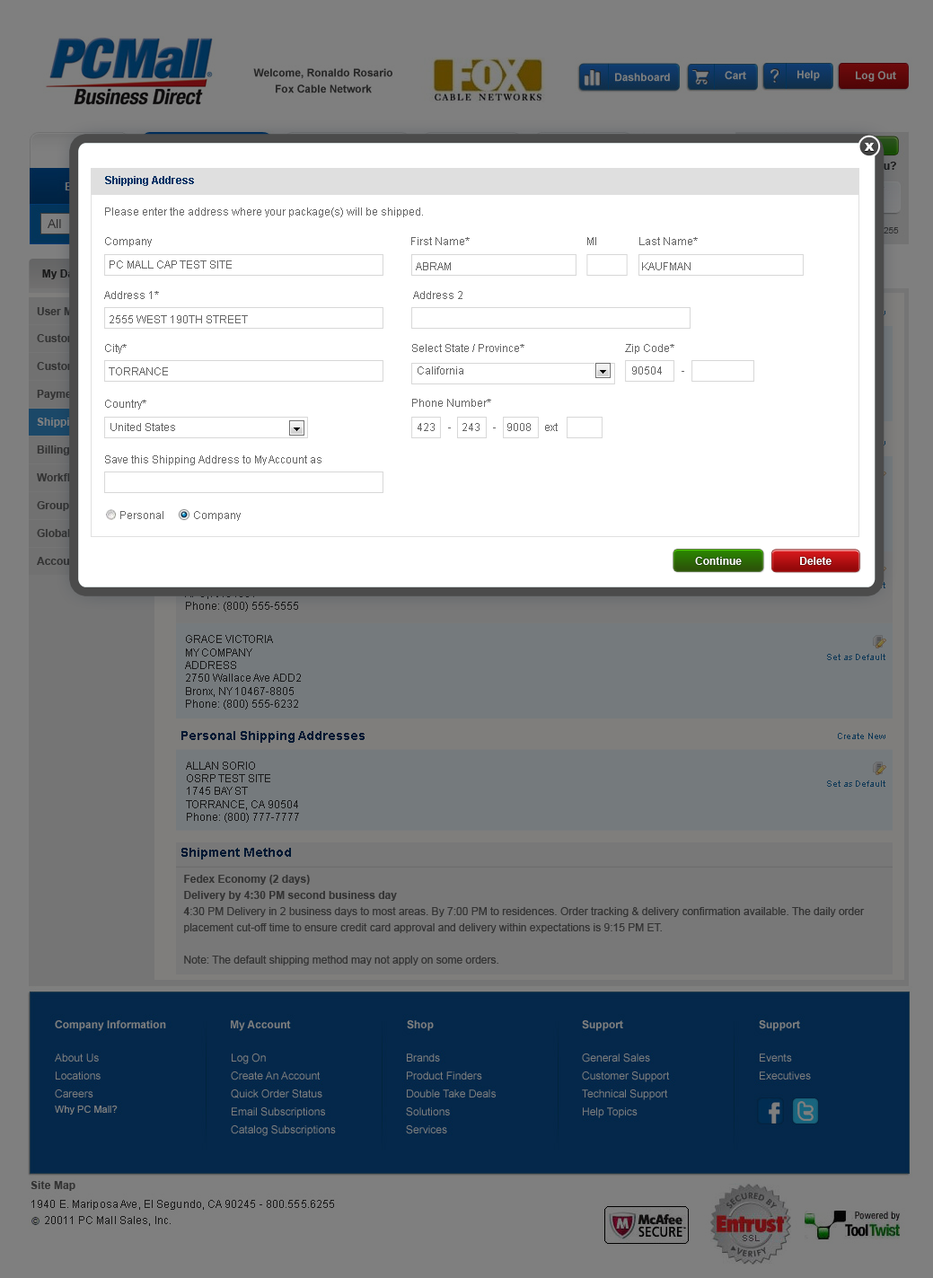
<style>
.page{position:relative;width:933px;height:1278px;background:#ffffff}
.page>*{position:absolute;margin:0}
.t1{font:10.8px "Arial-BoldMT";color:#003366}
.t2{font:10.8px "ArialMT";color:#666666}
.t3{font:10.8px "Arial-BoldMT"}
.t4{font:10.8px "Arial-BoldMT";color:#333333}
.t5{font:10.8px "Arial-BoldMT";color:#ffffff}
.t6{font:10.8px "ArialMT";color:#191919}
.t7{font:9px "ArialMT";color:#113a58}
.t8{font:12.6px "Arial-BoldMT";color:#001933}
.t9{font:10.8px/16.2px "ArialMT";color:#333333}
.t10{font:10.8px/16.2px "Arial-BoldMT";color:#333333}
</style>
<div class="page">
<p class="t1" style="left:105px;top:176px;width:89px;height:10px">Shipping Address</p>
<p class="t2" style="left:105px;top:207px;width:318px;height:10px">Please enter the address where your package(s) will be shipped.</p>
<p class="t2" style="left:105px;top:237px;width:47px;height:10px">Company</p>
<p class="t2" style="left:411px;top:237px;width:59px;height:8px">First Name*</p>
<p class="t2" style="left:587px;top:237px;width:9px;height:8px">MI</p>
<p class="t2" style="left:639px;top:237px;width:59px;height:8px">Last Name*</p>
<p class="t2" style="left:110px;top:260px;width:122px;height:9px">PC MALL CAP TEST SITE</p>
<p class="t2" style="left:416px;top:262px;width:35px;height:8px">ABRAM</p>
<p class="t2" style="left:642px;top:262px;width:49px;height:8px">KAUFMAN</p>
<p class="t2" style="left:104px;top:291px;width:55px;height:8px">Address 1*</p>
<p class="t2" style="left:413px;top:291px;width:50px;height:8px">Address 2</p>
<p class="t2" style="left:110px;top:315px;width:138px;height:8px">2555 WEST 190TH STREET</p>
<p class="t2" style="left:105px;top:344px;width:22px;height:10px">City*</p>
<p class="t2" style="left:412px;top:344px;width:112px;height:8px">Select State / Province*</p>
<p class="t2" style="left:625px;top:344px;width:49px;height:10px">Zip Code*</p>
<p class="t2" style="left:109px;top:367px;width:59px;height:8px">TORRANCE</p>
<p class="t2" style="left:418px;top:366px;width:45px;height:8px">California</p>
<p class="t2" style="left:632px;top:366px;width:30px;height:8px">90504</p>
<p class="t2" style="left:105px;top:400px;width:41px;height:10px">Country*</p>
<p class="t2" style="left:412px;top:399px;width:79px;height:8px">Phone Number*</p>
<p class="t3" style="left:37px;top:418px;width:46px;height:9px">Shipping</p>
<p class="t2" style="left:110px;top:423px;width:65px;height:8px">United States</p>
<p class="t2" style="left:418px;top:423px;width:17px;height:8px">423</p>
<p class="t2" style="left:463px;top:423px;width:17px;height:8px">243</p>
<p class="t2" style="left:507px;top:423px;width:24px;height:8px">9008</p>
<p class="t2" style="left:545px;top:423px;width:13px;height:8px">ext</p>
<p class="t4" style="left:37px;top:445px;width:32px;height:10px">Billing</p>
<p class="t2" style="left:105px;top:455px;width:217px;height:10px">Save this Shipping Address to My Account as</p>
<p class="t2" style="left:120px;top:511px;width:43px;height:8px">Personal</p>
<p class="t2" style="left:194px;top:511px;width:47px;height:10px">Company</p>
<p class="t5" style="left:695px;top:557px;width:47px;height:8px">Continue</p>
<p class="t5" style="left:800px;top:557px;width:32px;height:8px">Delete</p>
<p class="t6" style="left:185px;top:635px;width:116px;height:74px">GRACE VICTORIA<br>MY COMPANY<br>ADDRESS<br>2750 Wallace Ave ADD2<br>Bronx, NY 10467-8805<br>Phone: (800) 555-6232</p>
<p class="t7" style="left:827px;top:654px;width:58px;height:6px">Set as Default</p>
<p class="t8" style="left:181px;top:731px;width:184px;height:12px">Personal Shipping Addresses</p>
<p class="t7" style="left:838px;top:733px;width:47px;height:6px">Create New</p>
<p class="t6" style="left:186px;top:762px;width:113px;height:61px">ALLAN SORIO<br>OSRP TEST SITE<br>1745 BAY ST<br>TORRANCE, CA 90504<br>Phone: (800) 777-7777</p>
<p class="t7" style="left:827px;top:780px;width:58px;height:7px">Set as Default</p>
<p class="t8" style="left:181px;top:848px;width:110px;height:11px">Shipment Method</p>
<p class="t9" style="left:183px;top:875px;width:682px;height:90px"><span class="t10">Fedex Economy (2 days)<br>Delivery by 4:30 PM second business day<br>4</span>:30 PM Delivery in 2 business days to most areas. By 7:00 PM to residences. Order tracking &amp; delivery confirmation available. The daily order <br>placement cut-off time to ensure credit card approval and delivery within expectations is 9:15 PM ET.<br><br>Note: The default shipping method may not apply on some orders.</p>
</div>
